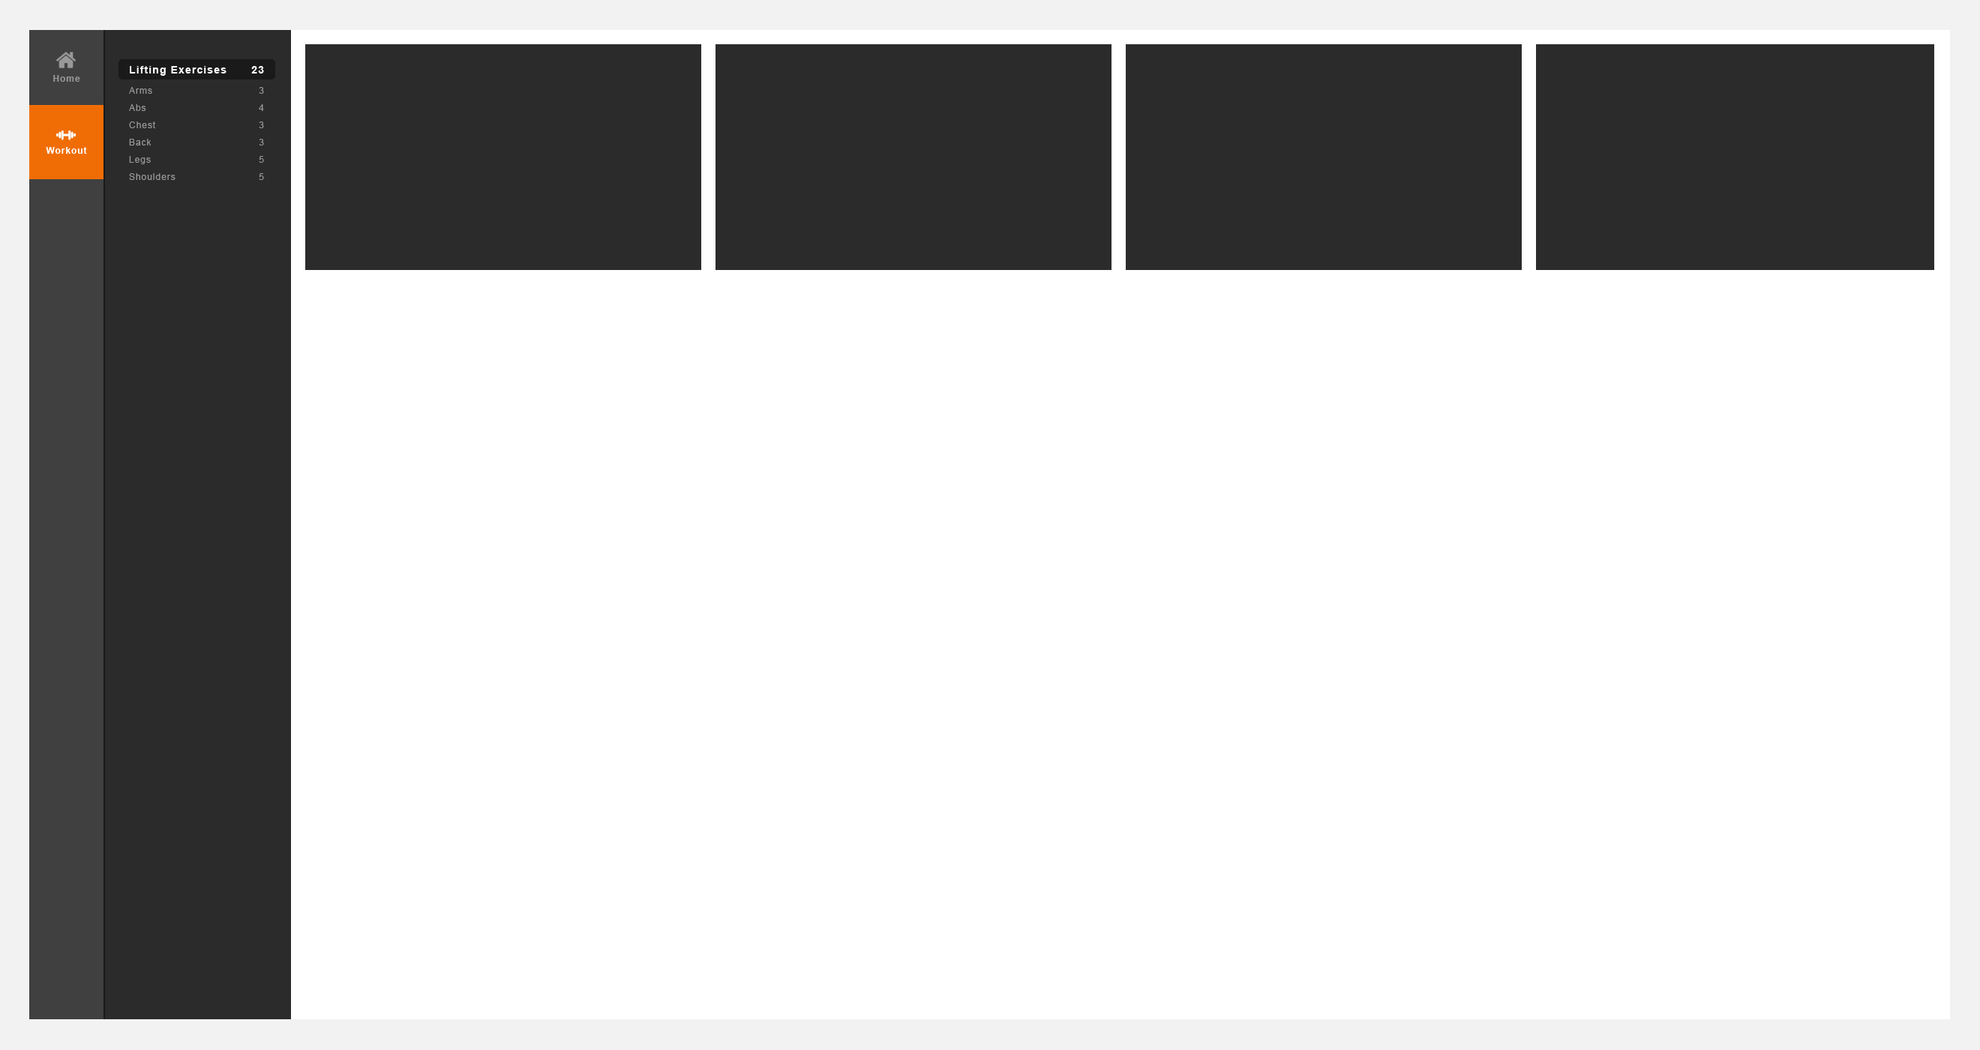
<style>
.page{position:relative;width:1980px;height:1050px;background:#ffffff}
.page>*{position:absolute;margin:0}
.t1{font:9px "Arial-BoldMT";letter-spacing:0.08em;color:#999999}
.t2{font:10.5px "Arial-BoldMT";letter-spacing:0.08em;color:#ffffff}
.t3{font:9px/17.2px "ArialMT";letter-spacing:0.08em;color:#999999}
.t4{font:9px "Arial-BoldMT";letter-spacing:0.08em;color:#ffffff}
</style>
<div class="page">
<p class="t1" style="left:53px;top:75px;width:27px;height:7px">Home</p>
<p class="t2" style="left:130px;top:66px;width:96px;height:10px">Lifting Exercises</p>
<p class="t2" style="left:251px;top:66px;width:13px;height:8px">23</p>
<p class="t3" style="left:129px;top:87px;width:47px;height:93px">Arms<br>Abs<br>Chest<br>Back<br>Legs<br>Shoulders</p>
<p class="t3" style="left:259px;top:87px;width:5px;height:93px;text-align:right">3<br>4<br>3<br>3<br>5<br>5</p>
<p class="t4" style="left:46px;top:147px;width:41px;height:7px">Workout</p>
</div>
